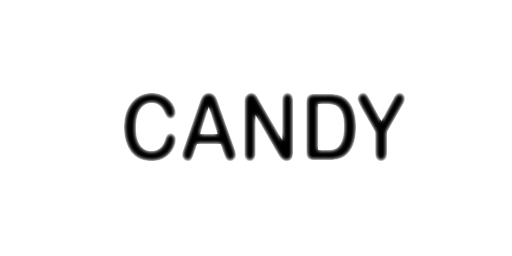
<style>
.page{position:relative;width:512px;height:256px;background:#ffffff}
.page>*{position:absolute;margin:0}
.t1{font:92.2px "ArialRoundedMTBold";scale:0.88 1}
</style>
<div class="page">
<p class="t1" style="left:124px;top:93px;width:281px;height:68px">CANDY</p>
</div>
